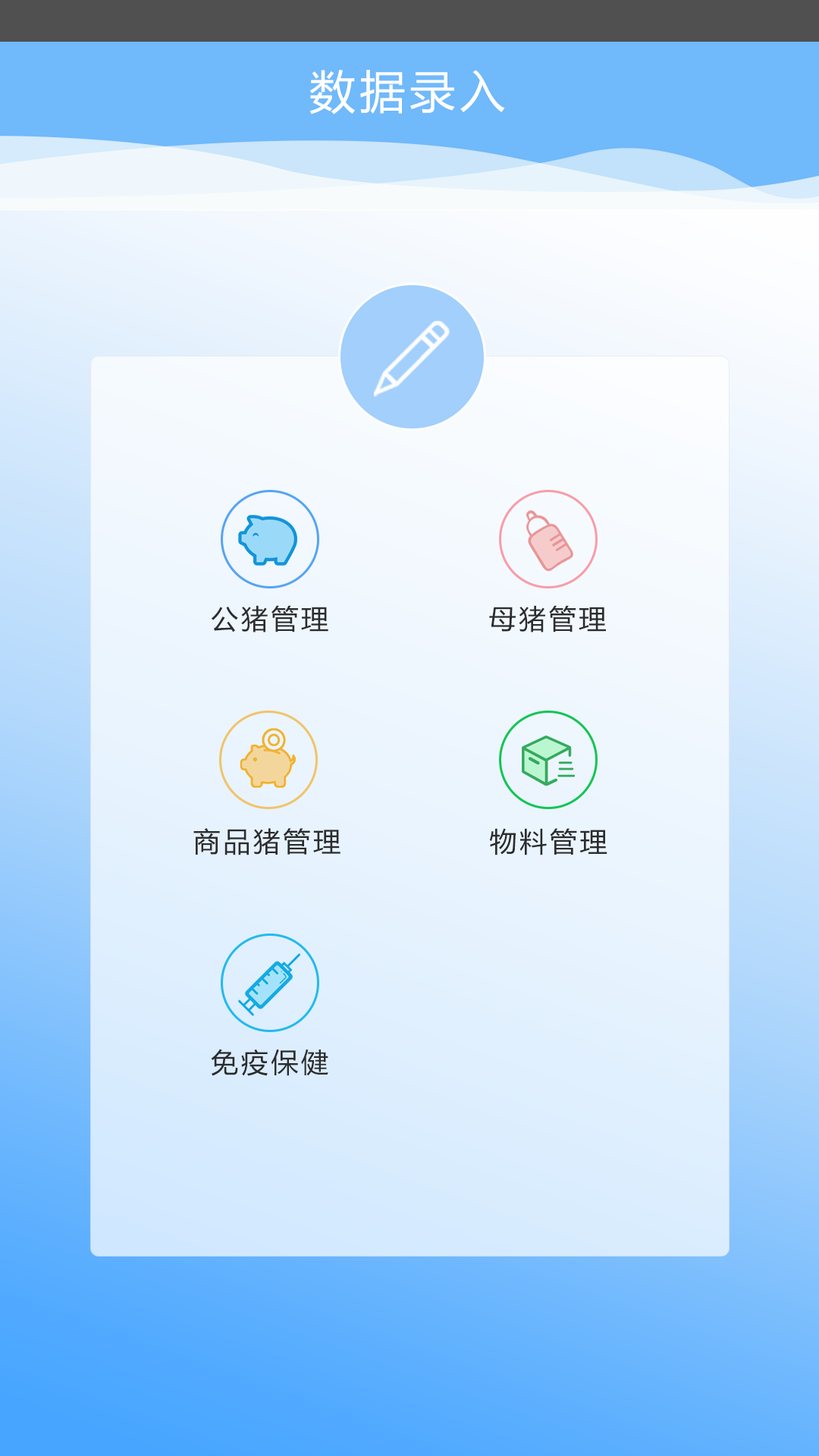
<style>
.page{position:relative;width:819px;height:1456px}
.page>*{position:absolute;margin:0}
.t1{font:45.5px "MicrosoftYaHei";letter-spacing:0.1em;color:#ffffff}
.t2{font:27.3px "MicrosoftYaHei";letter-spacing:0.1em;color:#2c2c2d}
</style>
<div class="page">
<p class="t1" style="left:309px;top:70px;width:196px;height:45px">数据录入</p>
<p class="t2" style="left:212px;top:605px;width:116px;height:27px">公猪管理</p>
<p class="t2" style="left:489px;top:605px;width:117px;height:27px">母猪管理</p>
<p class="t2" style="left:193px;top:828px;width:147px;height:27px">商品猪管理</p>
<p class="t2" style="left:489px;top:828px;width:118px;height:27px">物料管理</p>
<p class="t2" style="left:211px;top:1049px;width:117px;height:27px">免疫保健</p>
</div>
